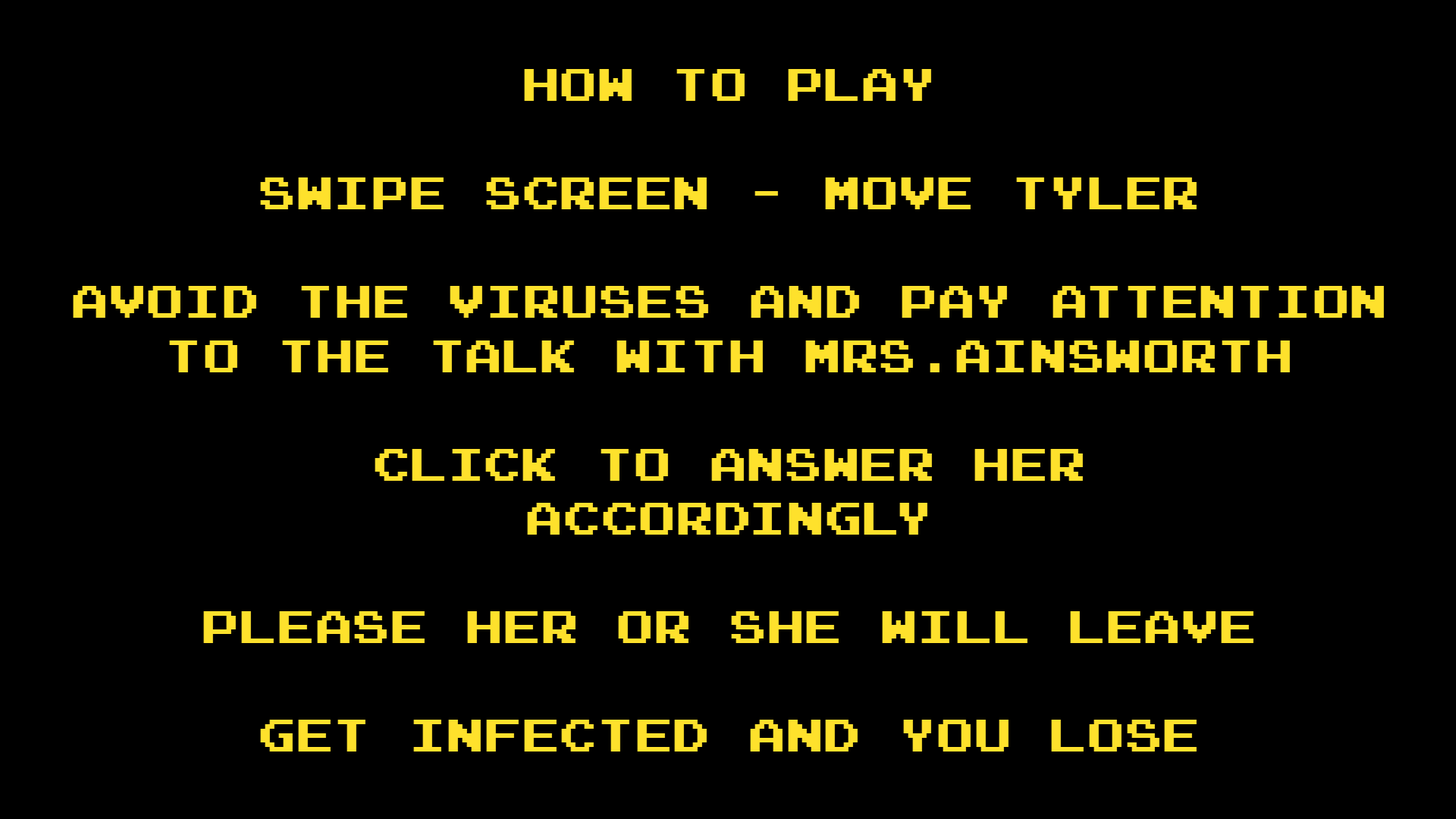
<style>
.page{position:relative;width:1456px;height:819px;background:#000000}
.page>*{position:absolute;margin:0}
.t1{font:45.5px/54.2px "JoystixMonospace-Regular";color:#fee12c}
</style>
<div class="page">
<p class="t1" style="left:73px;top:69px;width:1311px;height:682px;text-align:center">HOW TO PLAY<br><br>SWIPE SCREEN - MOVE TYLER<br><br>AVOID THE VIRUSES AND PAY ATTENTION<br>TO THE TALK WITH MRS.AINSWORTH<br><br>CLICK TO ANSWER HER<br>ACCORDINGLY<br><br>PLEASE HER OR SHE WILL LEAVE<br><br>GET INFECTED AND YOU LOSE</p>
</div>
